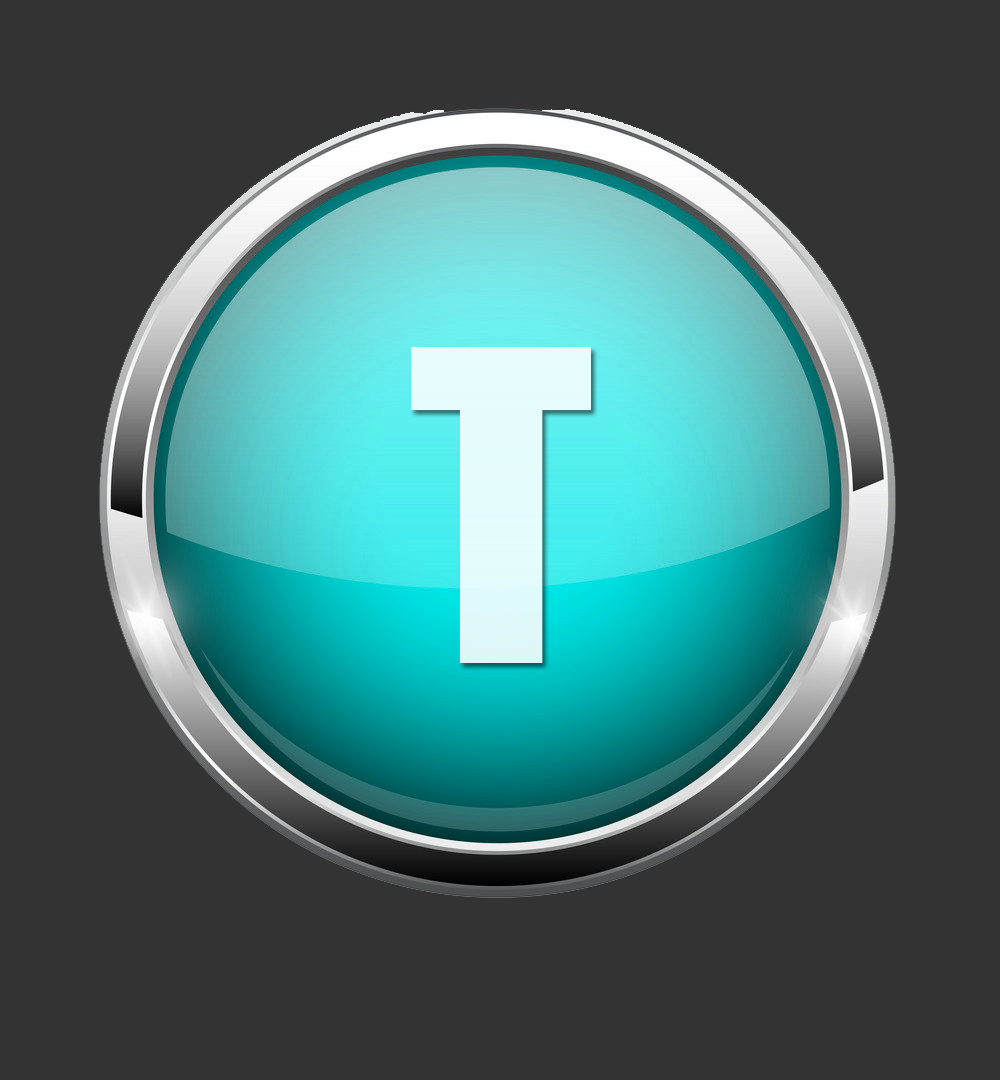
<style>
.page{position:relative;width:1000px;height:1080px;background:#333333}
.page>*{position:absolute;margin:0}
.t1{font:400px "Impact";color:#e5fcfc}
</style>
<div class="page">
<p class="t1" style="left:411px;top:347px;width:180px;height:316px">T</p>
</div>
